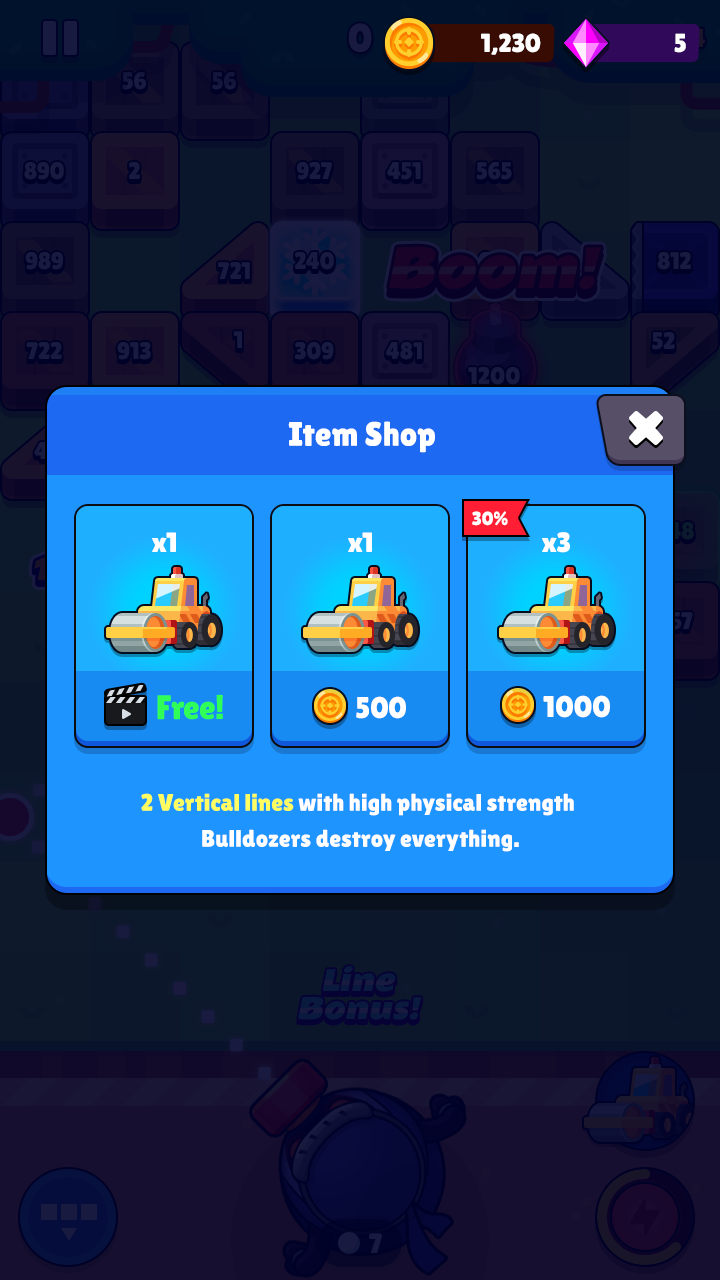
<style>
.page{position:relative;width:720px;height:1280px}
.page>*{position:absolute;margin:0}
.t1{font:26px "LilitaOne";letter-spacing:-0.01em;color:#ffffff;text-transform:uppercase}
.t2{font:34px "LilitaOne";color:#ffffff}
.t3{font:19px "LilitaOne";color:#ffffff;text-transform:uppercase}
.t4{font:28px "LilitaOne";color:#ffffff}
.t5{font:34px "LilitaOne";color:#30ff58}
.t6{font:30px "LilitaOne";color:#ffffff}
.t7{font:24px/36px "LilitaOne";color:#ffffff}
.t8{font:24px/36px "LilitaOne";color:#ffff60}
</style>
<div class="page">
<p class="t1" style="left:481px;top:33px;width:60px;height:22px">1,230</p>
<p class="t1" style="left:674px;top:33px;width:12px;height:20px">5</p>
<p class="t2" style="left:288px;top:421px;width:147px;height:32px">Item Shop</p>
<p class="t3" style="left:472px;top:511px;width:36px;height:15px">30%</p>
<p class="t4" style="left:152px;top:532px;width:24px;height:20px">x1</p>
<p class="t4" style="left:348px;top:532px;width:24px;height:20px">x1</p>
<p class="t4" style="left:542px;top:532px;width:28px;height:21px">x3</p>
<p class="t5" style="left:157px;top:694px;width:66px;height:26px">Free!</p>
<p class="t6" style="left:356px;top:696px;width:50px;height:23px">500</p>
<p class="t6" style="left:543px;top:695px;width:67px;height:23px">1000</p>
<p class="t7" style="left:141px;top:793px;width:433px;height:59px;text-align:center"><span class="t8">2 Vertical lines</span> with high physical strength <br>Bulldozers destroy everything.</p>
</div>
